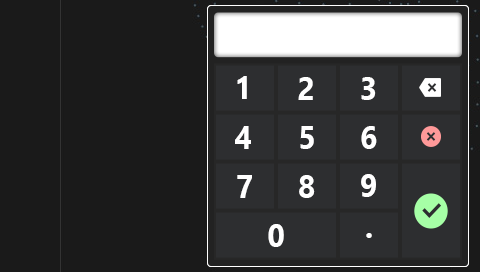
<style>
.page{position:relative;width:480px;height:272px;background:#1a1a1a}
.page>*{position:absolute;margin:0}
.t1{font:32px "SegoeUI-Bold";color:#ffffff;scale:0.94 1}
</style>
<div class="page">
<p class="t1" style="left:237px;top:76px;width:10px;height:23px">1</p>
<p class="t1" style="left:237px;top:76px;width:10px;height:23px">1</p>
<p class="t1" style="left:298px;top:77px;width:15px;height:23px">2</p>
<p class="t1" style="left:298px;top:77px;width:15px;height:23px">2</p>
<p class="t1" style="left:361px;top:77px;width:15px;height:23px">3</p>
<p class="t1" style="left:361px;top:77px;width:15px;height:23px">3</p>
<p class="t1" style="left:235px;top:126px;width:16px;height:23px">4</p>
<p class="t1" style="left:235px;top:126px;width:16px;height:23px">4</p>
<p class="t1" style="left:300px;top:126px;width:14px;height:23px">5</p>
<p class="t1" style="left:300px;top:126px;width:14px;height:23px">5</p>
<p class="t1" style="left:361px;top:126px;width:16px;height:23px">6</p>
<p class="t1" style="left:361px;top:126px;width:16px;height:23px">6</p>
<p class="t1" style="left:361px;top:174px;width:15px;height:23px">9</p>
<p class="t1" style="left:361px;top:174px;width:15px;height:23px">9</p>
<p class="t1" style="left:237px;top:175px;width:15px;height:23px">7</p>
<p class="t1" style="left:237px;top:175px;width:15px;height:23px">7</p>
<p class="t1" style="left:299px;top:175px;width:16px;height:23px">8</p>
<p class="t1" style="left:299px;top:175px;width:16px;height:23px">8</p>
<p class="t1" style="left:268px;top:224px;width:16px;height:23px">0</p>
<p class="t1" style="left:366px;top:233px;width:6px;height:5px">.</p>
<p class="t1" style="left:366px;top:233px;width:6px;height:5px">.</p>
</div>
